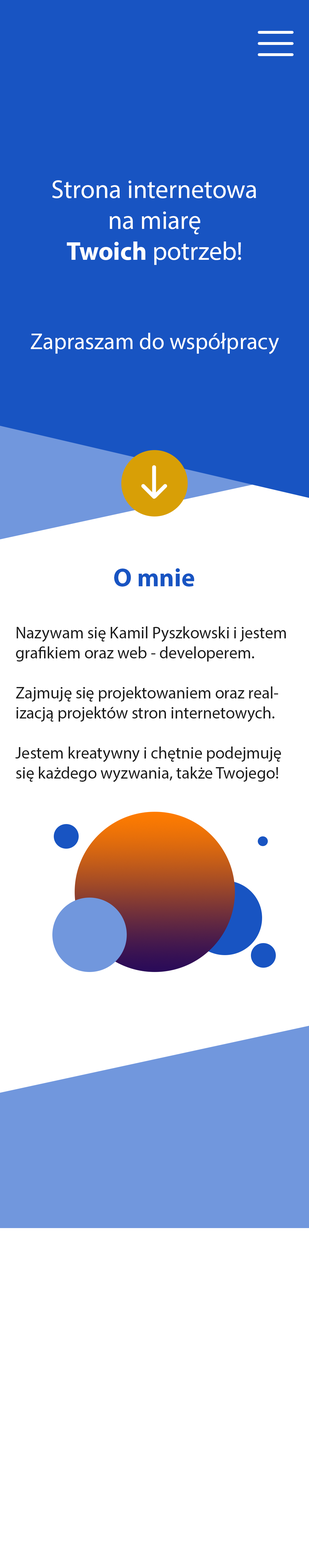
<style>
.page{position:relative;width:309px;height:1568px;background:#ffffff}
.page>*{position:absolute;margin:0}
.t1{font:25.8px "MyriadPro-Regular";color:#ffffff}
.t2{font:25.8px "MyriadPro-Bold";color:#ffffff}
.t3{font:22.9px "MyriadPro-Regular";color:#ffffff}
.t4{font:25.8px "MyriadPro-Bold";color:#1854c2}
.t5{font:16.6px/20px "MyriadPro-Regular";color:#1d1d1d}
</style>
<div class="page">
<p class="t1" style="left:31px;top:180px;width:248px;height:174px;text-align:center">Strona internetowa<br>na miarę<br><span class="t2">Twoich</span> potrzeb!<br><br><br><span class="t3">Zapraszam do współpracy</span></p>
<p class="t4" style="left:114px;top:568px;width:80px;height:19px">O mnie</p>
<p class="t5" style="left:15px;top:626px;width:271px;height:156px">Nazywam się Kamil Pyszkowski i jestem grafikiem oraz web - developerem. <br><br>Zajmuję się projektowaniem oraz realizacją projektów stron internetowych. <br><br>Jestem kreatywny i chętnie podejmuję się każdego wyzwania, także Twojego!</p>
</div>
